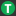
<style>
.page{position:relative;width:16px;height:16px;background:#11ab55}
.page>*{position:absolute;margin:0}
.t1{font:12px "MyriadPro-Bold";color:#ffffff}
</style>
<div class="page">
<p class="t1" style="left:4px;top:4px;width:8px;height:9px">T</p>
</div>
